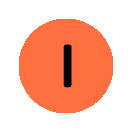
<style>
.page{position:relative;width:128px;height:128px;background:#ffffff}
.page>*{position:absolute;margin:0}
.t1{font:72px "Neuropol";color:#000000}
</style>
<div class="page">
<p class="t1" style="left:63px;top:44px;width:9px;height:44px">1</p>
</div>
